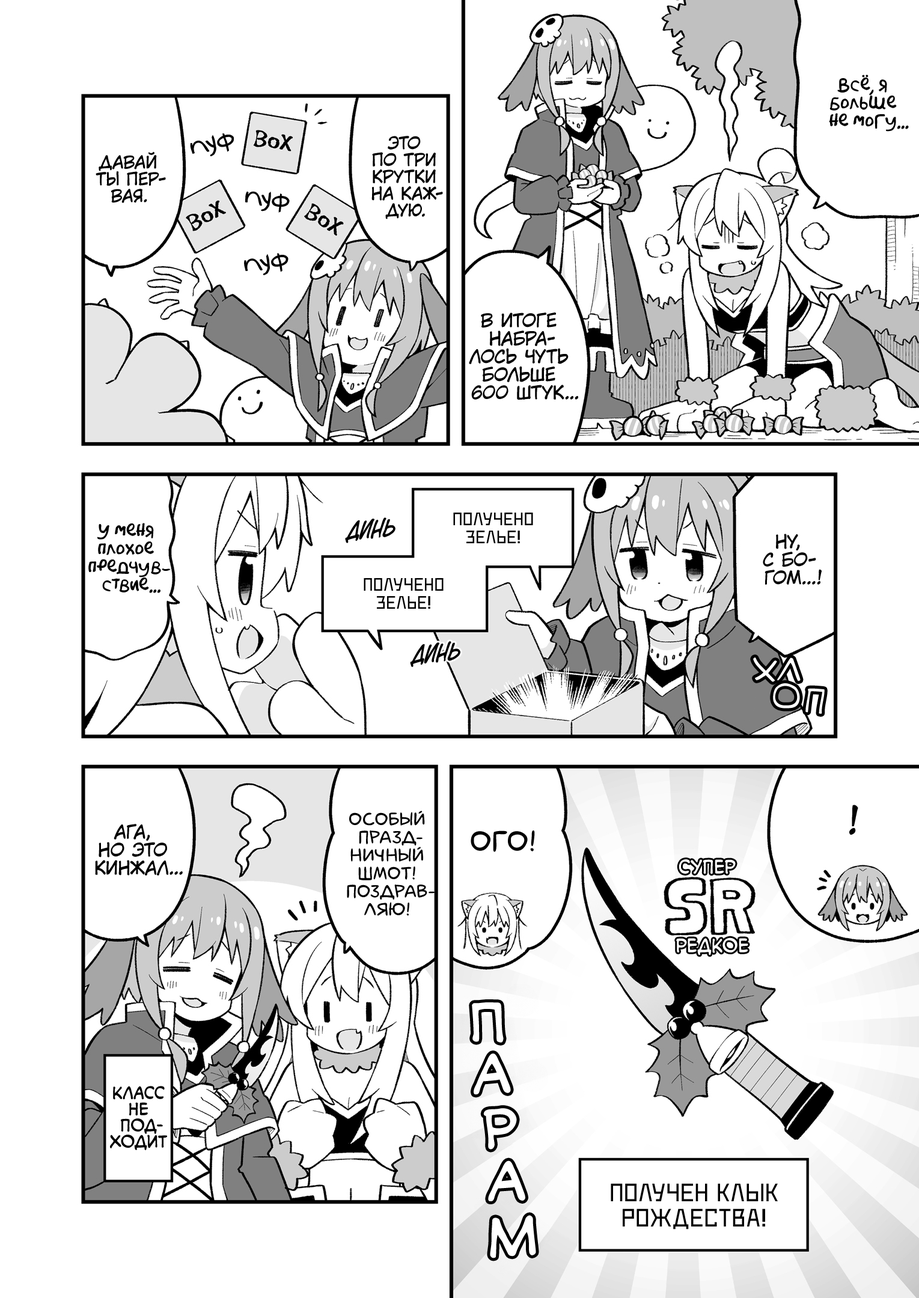
<style>
.page{position:relative;width:919px;height:1298px;background:#ffffff}
.page>*{position:absolute;margin:0}
.t1{font:18px "AkbarPlain";color:#000000}
.t2{font:27px "v_Augie";color:#000000}
.t3{font:16.8px "KuraiVoice2";color:#000000;text-transform:uppercase}
.t4{font:18px "KuraiVoice2";color:#000000;text-transform:uppercase}
.t5{font:21.6px "v_CCDearDiary";color:#000000;text-transform:uppercase}
.t6{font:18px "DeadMetroC";color:#000000;text-transform:uppercase}
.t7{font:32.4px "v_Augie";color:#ffffff;text-transform:uppercase}
.t8{font:36.1px "KuraiVoice2";color:#000000;text-transform:uppercase}
.t9{font:18px "laCartoonerie";color:#000000;text-transform:uppercase}
.t10{font:28.8px "laCartoonerie";color:#000000;text-transform:uppercase}
.t11{font:18px "v_CCMonologous";color:#ffffff;text-transform:uppercase}
.t12{font:50.5px "v_CCMonologous";color:#ffffff}
.t13{font:16.2px "v_CCMonologous";color:#000000;text-transform:uppercase}
.t14{font:25.2px "DeadMetroC";color:#000000;text-transform:uppercase}
</style>
<div class="page">
<p class="t1" style="left:829px;top:75px;width:80px;height:57px;text-align:center">Всё, я<br>больше<br>не могу...</p>
<p class="t2" style="left:190px;top:133px;width:44px;height:23px;rotate:-16deg">пуф</p>
<p class="t3" style="left:371px;top:136px;width:72px;height:83px;text-align:center">Это<br>по три<br>крутки<br>на каж-<br>дую.</p>
<p class="t3" style="left:96px;top:151px;width:70px;height:52px;text-align:center">Давай<br>ты пер-<br>вая.</p>
<p class="t2" style="left:245px;top:191px;width:45px;height:22px;rotate:4deg">пуф</p>
<p class="t2" style="left:244px;top:253px;width:44px;height:22px;rotate:-11deg">пуф</p>
<p class="t4" style="left:469px;top:312px;width:109px;height:88px;text-align:center">В итоге<br>набра-<br>лось чуть<br>больше<br>600 штук...</p>
<p class="t5" style="left:345px;top:517px;width:50px;height:26px;rotate:-3deg">динь</p>
<p class="t6" style="left:453px;top:513px;width:80px;height:30px;text-align:center">Получено<br>зелье!</p>
<p class="t1" style="left:88px;top:523px;width:83px;height:70px;text-align:center">У меня<br>плохое<br>предчув-<br>ствие...</p>
<p class="t4" style="left:763px;top:534px;width:58px;height:51px;text-align:center">Ну,<br>с бо-<br>гом...!</p>
<p class="t6" style="left:364px;top:578px;width:79px;height:31px;text-align:center">Получено<br>зелье!</p>
<p class="t5" style="left:410px;top:641px;width:50px;height:26px;rotate:-4deg">динь</p>
<p class="t7" style="left:753px;top:657px;width:24px;height:25px;rotate:17deg">х</p>
<p class="t7" style="left:777px;top:657px;width:23px;height:24px;rotate:12deg">л</p>
<p class="t7" style="left:773px;top:683px;width:27px;height:25px">о</p>
<p class="t7" style="left:805px;top:688px;width:19px;height:26px;rotate:7deg">п</p>
<p class="t8" style="left:849px;top:805px;width:9px;height:30px">!</p>
<p class="t9" style="left:347px;top:811px;width:87px;height:105px;text-align:center">Особый<br>празд-<br>ничный<br>шмот!<br>Поздрав-<br>ляю!</p>
<p class="t4" style="left:95px;top:824px;width:88px;height:51px;text-align:center">Ага,<br>но это<br>кинжал...</p>
<p class="t10" style="left:470px;top:830px;width:65px;height:22px">Ого!</p>
<p class="t11" style="left:678px;top:859px;width:57px;height:15px">супер</p>
<p class="t11" style="left:676px;top:937px;width:72px;height:18px">редкое</p>
<p class="t12" style="left:472px;top:1002px;width:32px;height:41px;rotate:-1deg">п</p>
<p class="t12" style="left:473px;top:1053px;width:38px;height:42px;rotate:-3deg">а</p>
<p class="t13" style="left:110px;top:1086px;width:57px;height:64px;text-align:center">Класс<br>не<br>под-<br>ходит</p>
<p class="t12" style="left:483px;top:1108px;width:34px;height:41px;rotate:-4deg">р</p>
<p class="t12" style="left:488px;top:1160px;width:37px;height:41px;rotate:-1deg">а</p>
<p class="t14" style="left:610px;top:1183px;width:168px;height:46px;text-align:center">Получен Клык<br>Рождества!</p>
<p class="t12" style="left:490px;top:1215px;width:46px;height:43px;rotate:-3deg">м</p>
</div>
